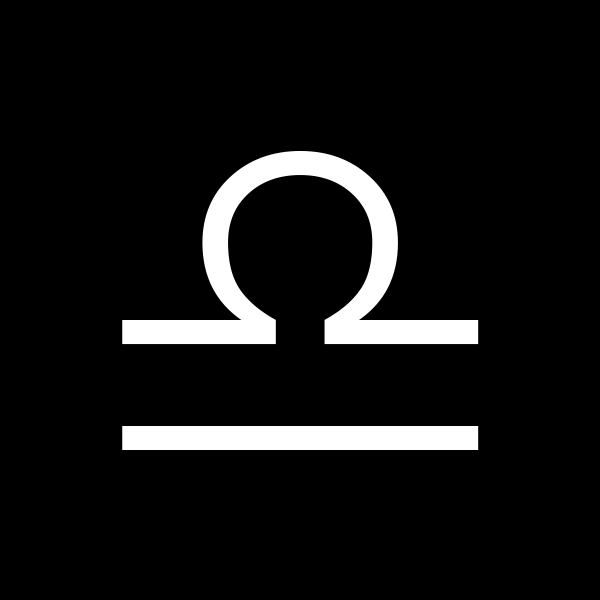
<style>
.page{position:relative;width:600px;height:600px;background:#000000}
.page>*{position:absolute;margin:0}
.t1{font:428.5px "ArialUnicodeMS";color:#ffffff}
</style>
<div class="page">
<p class="t1" style="left:122px;top:151px;width:357px;height:299px">♎︎</p>
</div>
